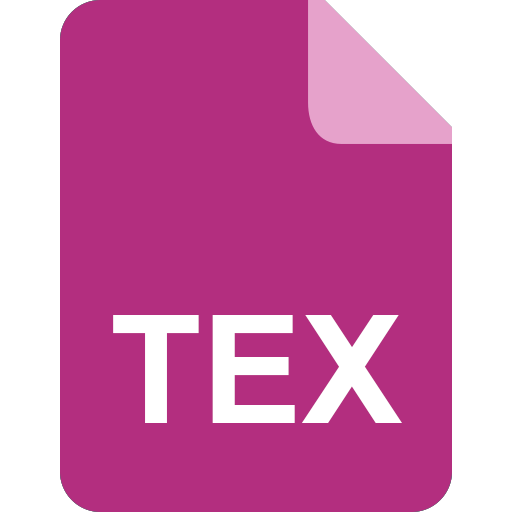
<style>
.page{position:relative;width:512px;height:512px;background:#b32e7f}
.page>*{position:absolute;margin:0}
.t1{font:150px "Arial-BoldMT";color:#ffffff}
</style>
<div class="page">
<p class="t1" style="left:113px;top:315px;width:289px;height:108px">TEX</p>
</div>
